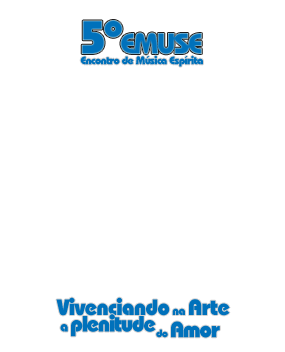
<style>
.page{position:relative;width:285px;height:352px;background:#ffffff}
.page>*{position:absolute;margin:0}
.t1{font:30px "BauhausITCbyBT-Heavy";letter-spacing:-0.075em;color:#0071bc}
.t2{font:48px "BauhausITCbyBT-Heavy";letter-spacing:-0.075em;color:#0071bc}
.t3{font:11px "BauhausITCbyBT-Heavy";letter-spacing:-0.05em;color:#0071bc}
.t4{font:22px "BauhausITCbyBT-Heavy";letter-spacing:-0.025em;color:#0071bc}
.t5{font:12px "BauhausITCbyBT-Heavy";letter-spacing:-0.025em;color:#0071bc}
.t6{font:22px "BauhausITCbyBT-Heavy";letter-spacing:-0.05em;color:#0071bc}
.t7{font:14px "BauhausITCbyBT-Heavy";letter-spacing:-0.05em;color:#0071bc}
</style>
<div class="page">
<p class="t1" style="left:81px;top:20px;width:121px;height:35px"><span class="t2">5º</span>EMUSE</p>
<p class="t3" style="left:80px;top:55px;width:123px;height:12px">Encontro de Música Espírita</p>
<p class="t4" style="left:56px;top:297px;width:174px;height:19px">Vivenciando <span class="t5">na </span>Arte</p>
<p class="t6" style="left:60px;top:314px;width:96px;height:23px"><span class="t7">a </span>plenitude</p>
<p class="t6" style="left:156px;top:321px;width:64px;height:17px"><span class="t3">do </span>Amor</p>
</div>
